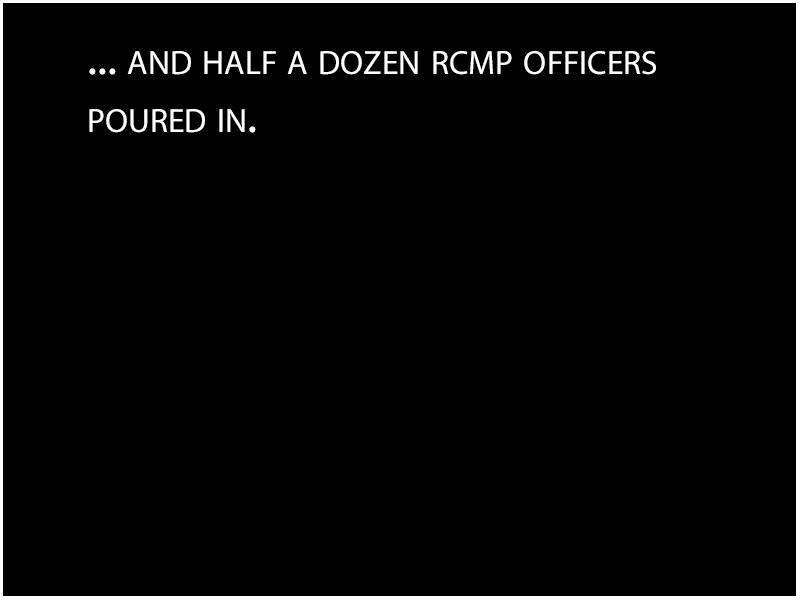
<style>
.page{position:relative;width:800px;height:600px;background:#000000}
.page>*{position:absolute;margin:0}
.t1{font:48px "MyriadPro-Regular";color:#ffffff;font-variant:small-caps}
</style>
<div class="page">
<p class="t1" style="left:89px;top:51px;width:567px;height:82px">... and half a dozen rcmp officers <br>poured in.</p>
</div>
